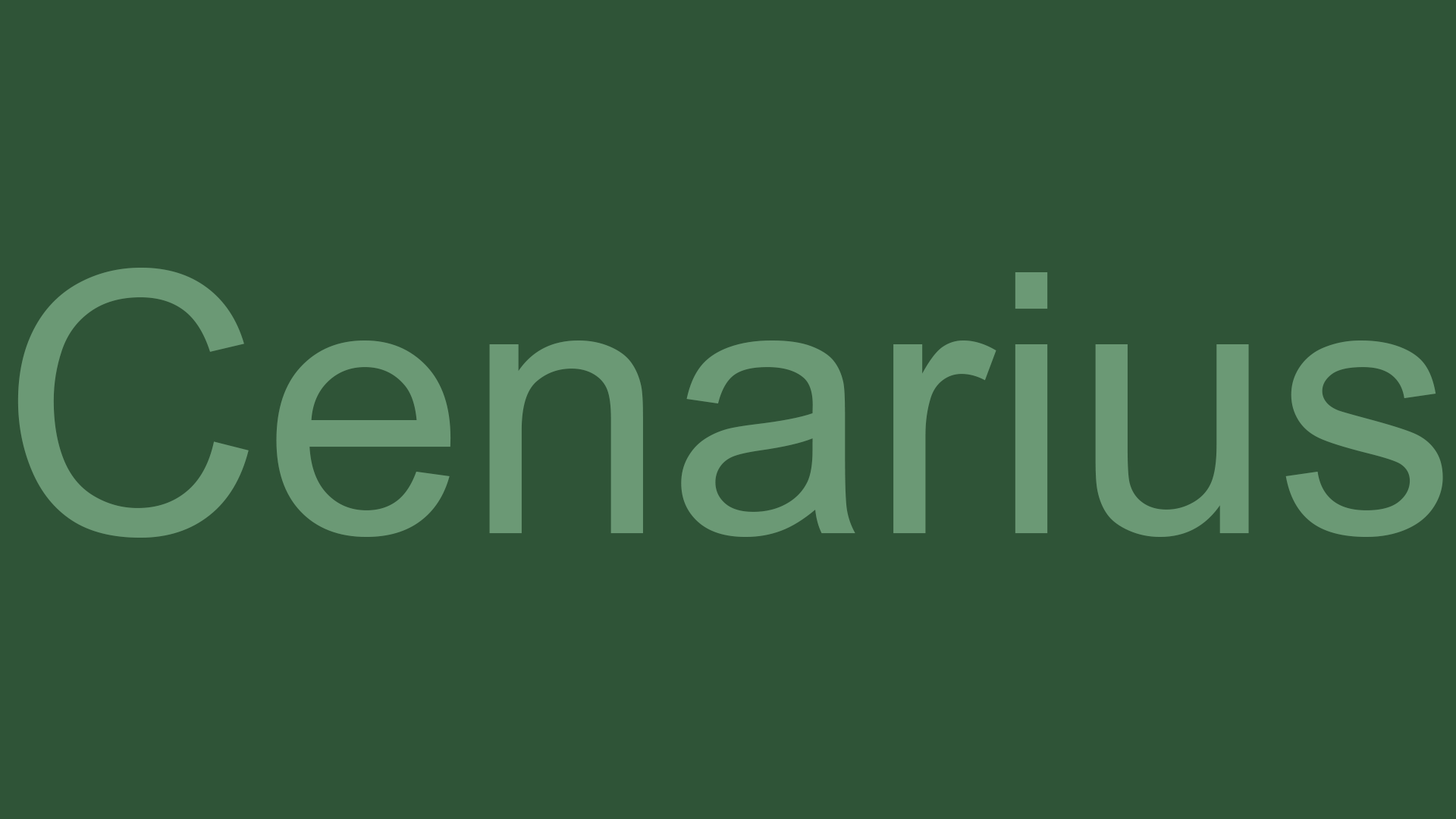
<style>
.page{position:relative;width:1456px;height:819px;background:#2f5437}
.page>*{position:absolute;margin:0}
.t1{font:364px "ArialMT";color:#6b9975}
</style>
<div class="page">
<p class="t1" style="left:17px;top:268px;width:1426px;height:270px">Cenarius</p>
</div>
